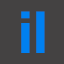
<style>
.page{position:relative;width:64px;height:64px;background:#444242}
.page>*{position:absolute;margin:0}
.t1{font:58px "HelveticaNeueLTStd-Bd";color:#0081f1}
</style>
<div class="page">
<p class="t1" style="left:21px;top:11px;width:24px;height:42px">il</p>
</div>
